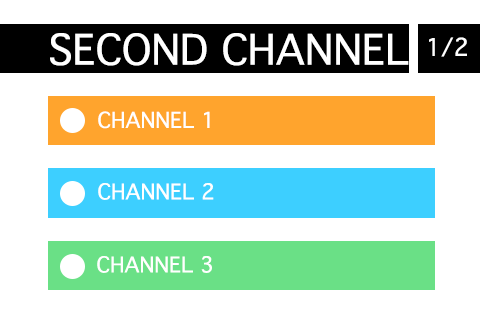
<style>
.page{position:relative;width:480px;height:320px;background:#ffffff}
.page>*{position:absolute;margin:0}
.t1{font:40.3px "Thonburi";color:#ffffff}
.t2{font:23.3px "Thonburi";color:#fefefe}
.t3{font:20.8px "Thonburi";color:#ffffff}
</style>
<div class="page">
<p class="t1" style="left:50px;top:33px;width:359px;height:33px">SECOND CHANNEL</p>
<p class="t2" style="left:429px;top:37px;width:38px;height:20px">1/2</p>
<p class="t3" style="left:98px;top:111px;width:112px;height:18px">CHANNEL 1</p>
<p class="t3" style="left:98px;top:183px;width:116px;height:17px">CHANNEL 2</p>
<p class="t3" style="left:97px;top:256px;width:115px;height:17px">CHANNEL 3</p>
</div>
